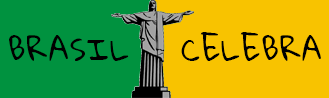
<style>
.page{position:relative;width:329px;height:98px;background:#f8c300}
.page>*{position:absolute;margin:0}
.t1{font:30px "GloriaHallelujah";letter-spacing:0.04em;color:#000000}
</style>
<div class="page">
<p class="t1" style="left:9px;top:35px;width:120px;height:26px">BRASIL</p>
<p class="t1" style="left:181px;top:32px;width:140px;height:29px">CELEBRA</p>
</div>
